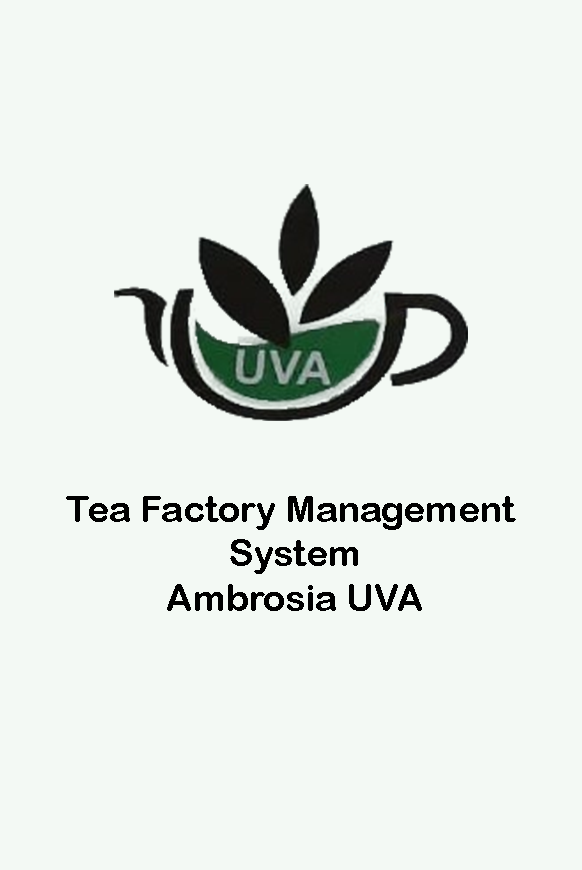
<style>
.page{position:relative;width:582px;height:870px;background:#f3f9f4}
.page>*{position:absolute;margin:0}
.t1{font:37px "ArialRoundedMTBold";color:#000000}
</style>
<div class="page">
<p class="t1" style="left:66px;top:496px;width:450px;height:115px;text-align:center">Tea Factory Management <br>System<br>Ambrosia UVA</p>
</div>
